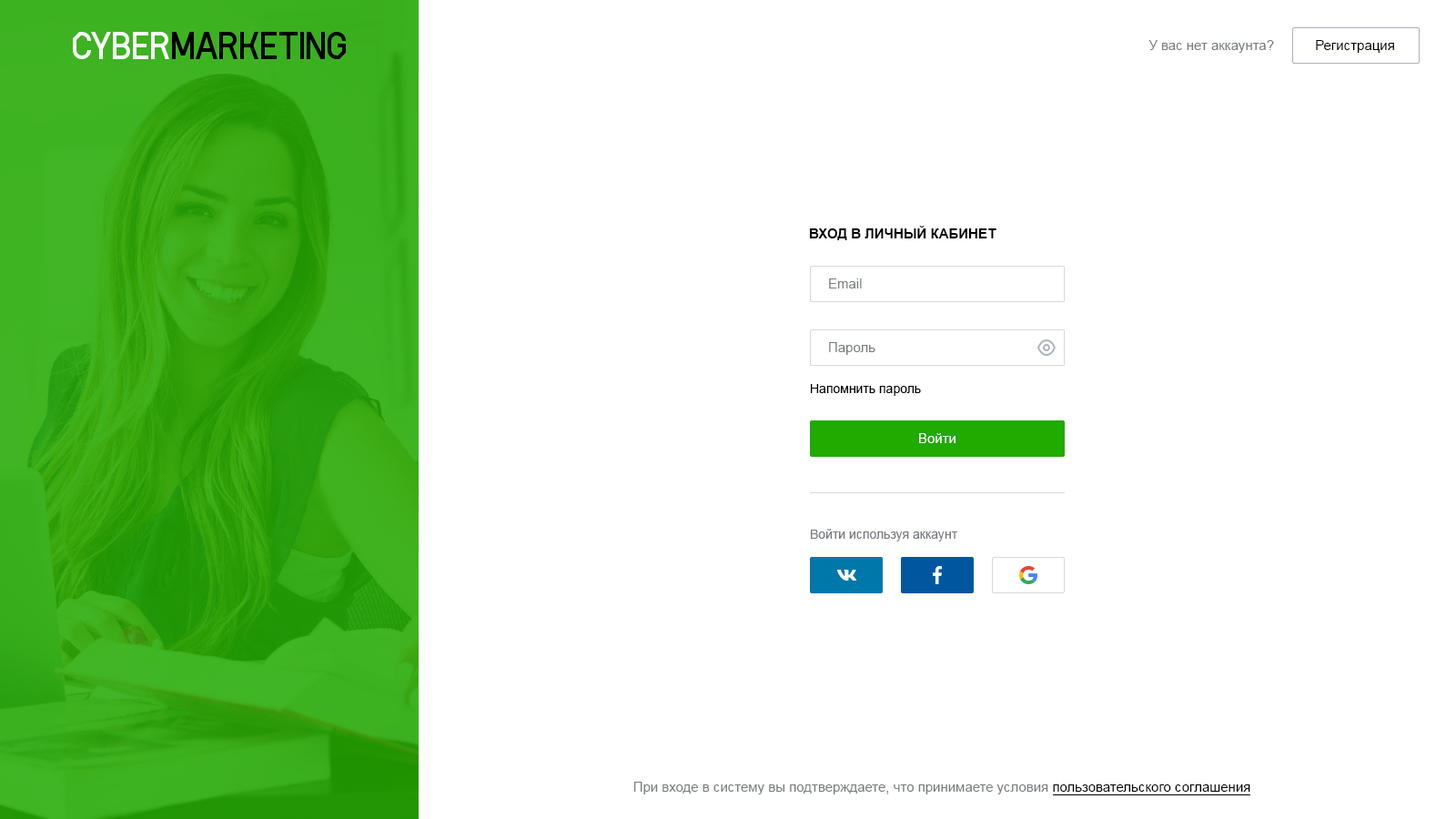
<style>
.page{position:relative;width:1456px;height:819px;background:#ffffff}
.page>*{position:absolute;margin:0}
.t1{font:13.6px "ArialMT";color:#787b81}
.t2{font:13.6px "ArialMT";color:#000000}
.t3{font:13.6px "Arial-BoldMT";color:#000000;text-transform:uppercase}
.t4{font:12.7px "ArialMT";color:#000000}
.t5{font:13.6px "ArialMT";color:#ffffff}
.t6{font:12.7px "ArialMT";color:#787b81}
</style>
<div class="page">
<p class="t1" style="left:1148px;top:40px;width:126px;height:13px">У вас нет аккаунта?</p>
<p class="t2" style="left:1316px;top:40px;width:78px;height:13px">Регистрация</p>
<p class="t3" style="left:809px;top:226px;width:187px;height:14px">Вход в личный кабинет</p>
<p class="t1" style="left:829px;top:278px;width:33px;height:10px">Email</p>
<p class="t1" style="left:829px;top:342px;width:46px;height:13px">Пароль</p>
<p class="t4" style="left:811px;top:384px;width:110px;height:12px">Напомнить пароль</p>
<p class="t5" style="left:919px;top:433px;width:36px;height:10px">Войти</p>
<p class="t6" style="left:811px;top:529px;width:146px;height:12px">Войти используя аккаунт</p>
<p class="t1" style="left:633px;top:782px;width:617px;height:12px">При входе в систему вы подтверждаете, что принимаете условия <span class="t2">пользовательского соглашения</span></p>
</div>
